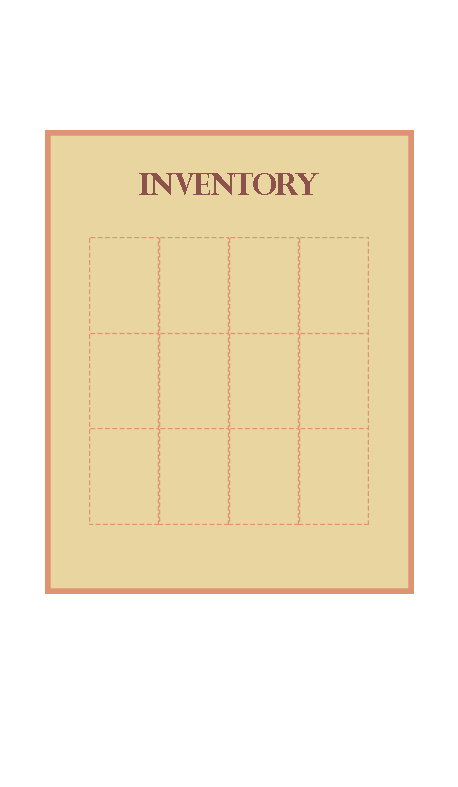
<style>
.page{position:relative;width:458px;height:787px;background:#ffffff}
.page>*{position:absolute;margin:0}
.t1{font:30px "PerpetuaTitlingMT-Bold";letter-spacing:-0.05em;color:#8e524d}
</style>
<div class="page">
<p class="t1" style="left:139px;top:173px;width:180px;height:22px">inventory</p>
</div>
